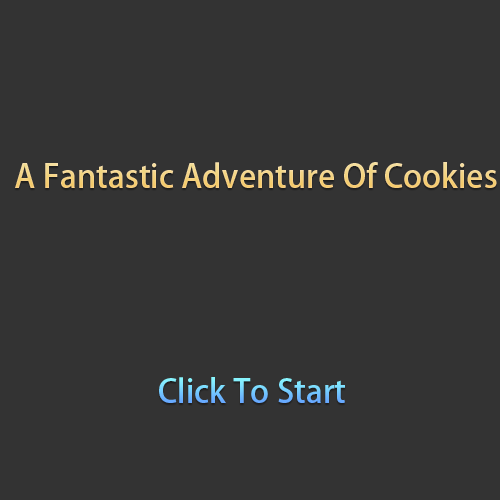
<style>
.page{position:relative;width:500px;height:500px;background:#333333}
.page>*{position:absolute;margin:0}
.t1{font:32px "AdobeHeitiStd-Regular";color:#f5d282}
.t2{font:32px "AdobeHeitiStd-Regular"}
</style>
<div class="page">
<p class="t1" style="left:15px;top:162px;width:482px;height:26px">A Fantastic Adventure Of Cookies</p>
<p class="t2" style="left:159px;top:377px;width:186px;height:26px">Click To Start</p>
</div>
